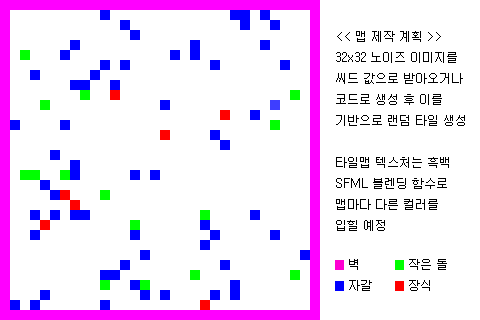
<style>
.page{position:relative;width:480px;height:320px;background:#ffffff}
.page>*{position:absolute;margin:0}
.t1{font:12px "Gulim";color:#000000}
.t2{font:12px "Gulim";color:#ff00d2}
.t3{font:12px "Gulim";color:#0000ff}
.t4{font:12px "Gulim";color:#00ff00}
.t5{font:12px "Gulim";color:#ff0000}
</style>
<div class="page">
<p class="t1" style="left:336px;top:31px;width:129px;height:200px">&lt;&lt; 맵 제작 계획 &gt;&gt;<br>32x32 노이즈 이미지를<br>씨드 값으로 받아오거나<br>코드로 생성 후 이를 <br>기반으로 랜덤 타일 생성<br><br>타일맵 텍스처는 흑백<br>SFML 블렌딩 함수로<br>맵마다 다른 컬러를 <br>입힐 예정</p>
<p class="t1" style="left:335px;top:259px;width:37px;height:32px"><span class="t2">■</span> 벽<br><span class="t3">■</span> 자갈</p>
<p class="t1" style="left:395px;top:259px;width:52px;height:32px"><span class="t4">■</span> 작은 돌<br><span class="t5">■</span> 장식</p>
</div>
